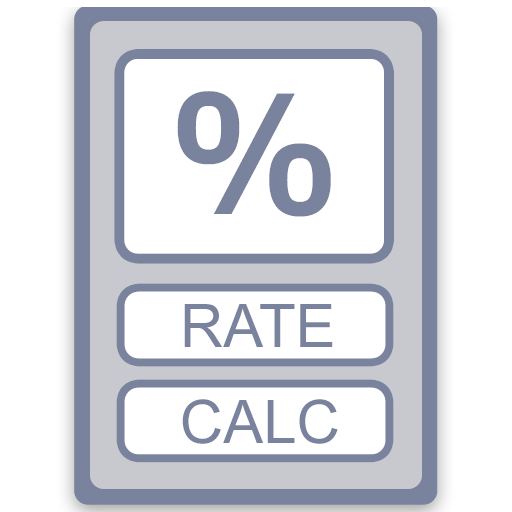
<style>
.page{position:relative;width:512px;height:512px;background:#ffffff}
.page>*{position:absolute;margin:0}
.t1{font:60px/24px "ArialMT";color:#79839d}
</style>
<div class="page">
<p class="t1" style="left:182px;top:304px;width:156px;height:140px">RATE<br><br><br><br>CALC</p>
</div>
